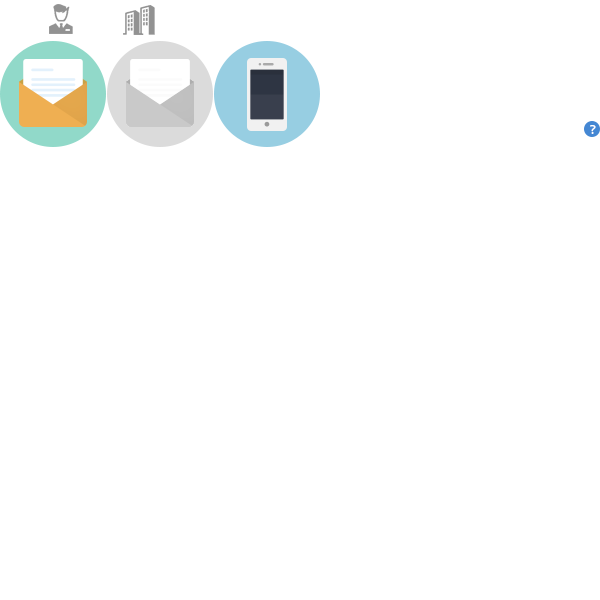
<style>
.page{position:relative;width:600px;height:600px;background:#ffffff}
.page>*{position:absolute;margin:0}
.t1{font:11px "AdobeHeitiStd-Regular";color:#ffffff}
</style>
<div class="page">
<p class="t1" style="left:590px;top:125px;width:6px;height:9px">？</p>
</div>
